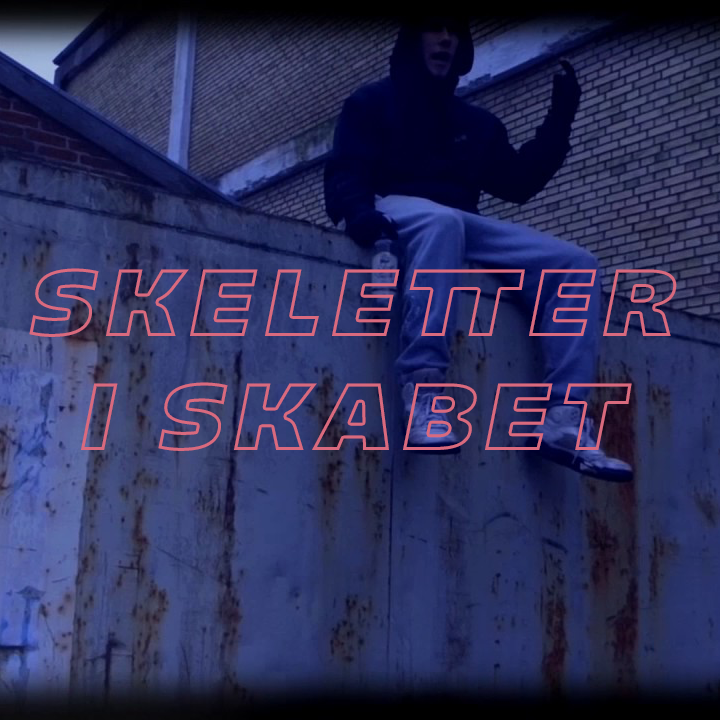
<style>
.page{position:relative;width:720px;height:720px}
.page>*{position:absolute;margin:0}
.t1{font:95px "Majoris-Italic";letter-spacing:0.1em;text-transform:uppercase}
</style>
<div class="page">
<p class="t1" style="left:29px;top:268px;width:648px;height:183px;text-align:center">skeletter<br>i skabet</p>
</div>
